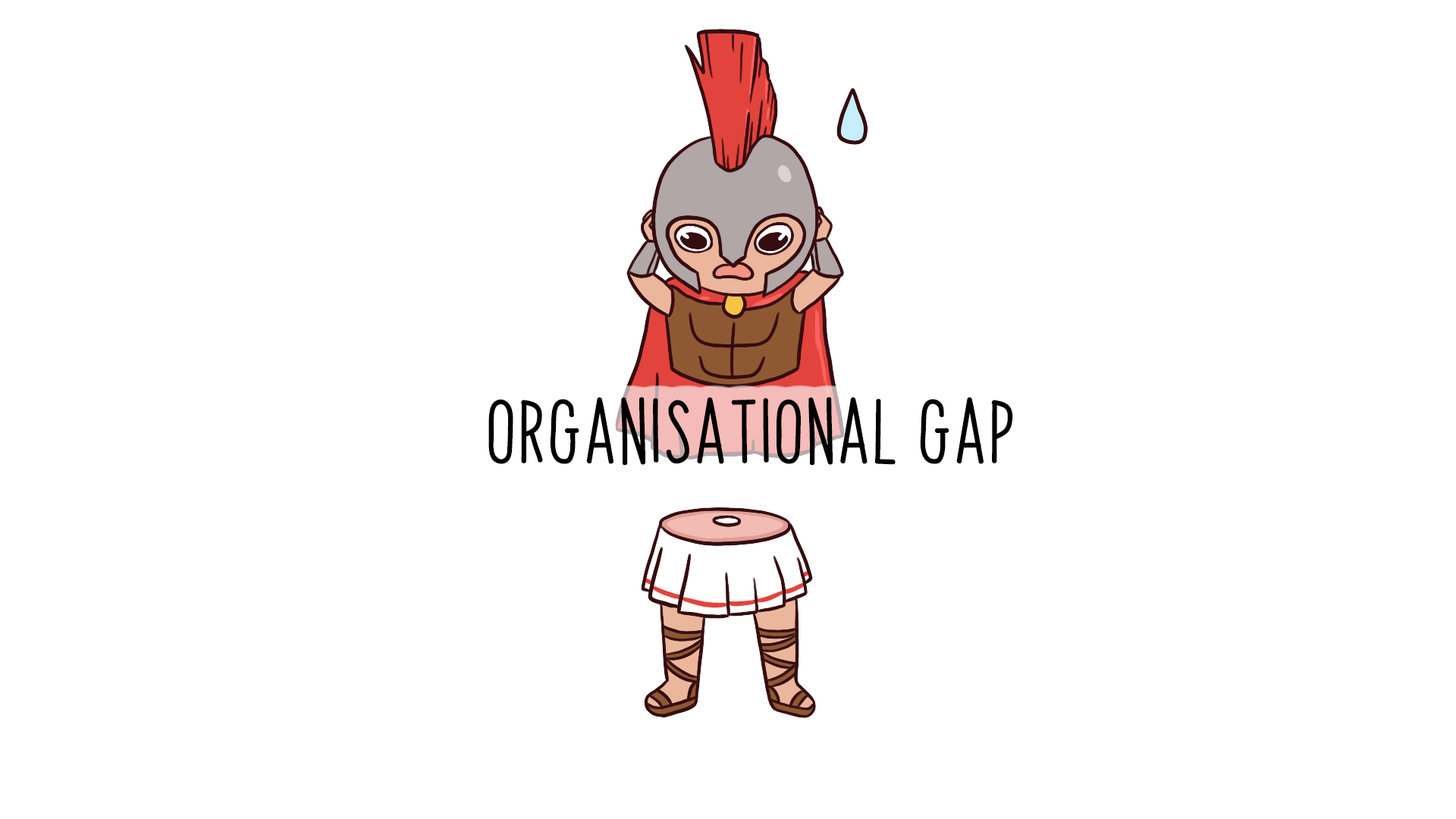
<style>
.page{position:relative;width:1456px;height:819px;background:#ffffff}
.page>*{position:absolute;margin:0}
.t1{font:54.6px "PapayaSunrise";color:#000000;font-weight:bold}
</style>
<div class="page">
<p class="t1" style="left:488px;top:397px;width:525px;height:69px">organisational gap</p>
</div>
